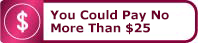
<style>
.page{position:relative;width:198px;height:43px}
.page>*{position:absolute;margin:0}
.t1{font:12px/13px "Verdana-Bold";color:#6a0026}
</style>
<div class="page">
<p class="t1" style="left:50px;top:10px;width:119px;height:25px">You Could Pay No <br>More Than $25</p>
</div>
